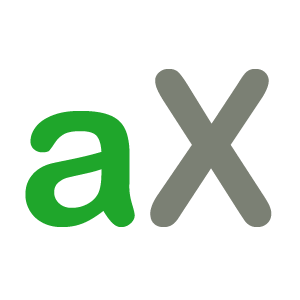
<style>
.page{position:relative;width:300px;height:300px;background:#ffffff}
.page>*{position:absolute;margin:0}
.t1{font:213.3px "ArialRoundedMTBold";letter-spacing:0.021em;color:#1fa62b}
.t2{font:213.3px "ArialRoundedMTBold";letter-spacing:0.021em;color:#7b8074}
</style>
<div class="page">
<p class="t1" style="left:25px;top:69px;width:247px;height:158px">a<span class="t2">X</span></p>
</div>
